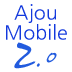
<style>
.page{position:relative;width:72px;height:72px;background:#ffffff}
.page>*{position:absolute;margin:0}
.t1{font:19.9px/19.9px "NanumGothic";color:#1339dd}
.t2{font:86.7px "HaanCjaM";color:#225bde;scale:0.71 1}
.t3{font:37.3px "HaanCjaM";color:#225bde}
</style>
<div class="page">
<p class="t1" style="left:6px;top:4px;width:61px;height:36px;text-align:center">Ajou<br>Mobile</p>
<p class="t2" style="left:14px;top:42px;width:22px;height:27px">2</p>
<p class="t3" style="left:36px;top:52px;width:21px;height:15px">.0</p>
</div>
